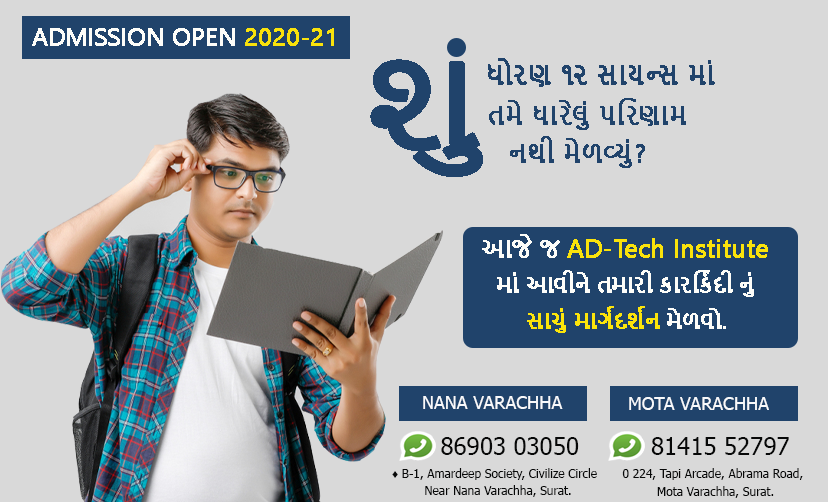
<style>
.page{position:relative;width:828px;height:502px;background:#d9d9d9}
.page>*{position:absolute;margin:0}
.t1{font:24px "NirmalaUI";color:#fdfdf9;font-weight:bold}
.t2{font:24px "NirmalaUI";color:#f9e20c;font-weight:bold}
.t3{font:122.1px "NirmalaUI";color:#20436b;font-weight:bold;scale:1.18 1}
.t4{font:26px "NirmalaUI";color:#20436b;font-weight:bold}
.t5{font:25px "NirmalaUI";color:#20436b;font-weight:bold}
.t6{font:25px "NirmalaUI";color:#fae30b;font-weight:bold}
.t7{font:21px "NirmalaUI";color:#fdfdf9;font-weight:bold}
.t8{font:21px "NirmalaUI";color:#fce40b;font-weight:bold}
.t9{font:18px "Tahoma";color:#f8f9fb}
.t10{font:24px "Tahoma";color:#070808}
.t11{font:12px "Tahoma";color:#070808}
</style>
<div class="page">
<p class="t1" style="left:32px;top:28px;width:302px;height:18px">ADMISSION OPEN <span class="t2">2020-21</span></p>
<p class="t3" style="left:370px;top:59px;width:113px;height:118px">શુ</p>
<p class="t4" style="left:488px;top:58px;width:227px;height:29px">ધોરણ ૧૨ સાયન્સ માં</p>
<p class="t5" style="left:489px;top:98px;width:197px;height:32px">તમે ધારેલું પરિણામ</p>
<p class="t5" style="left:510px;top:136px;width:135px;height:32px">નથી મેળવ્યું?</p>
<p class="t6" style="left:482px;top:234px;width:286px;height:24px"><span class="t1">આજે જ </span>AD-Tech Institute</p>
<p class="t7" style="left:497px;top:270px;width:257px;height:27px">માં આવીને તમારી કારર્કિદી નું</p>
<p class="t8" style="left:527px;top:306px;width:199px;height:27px">સાચું માર્ગદર્શન <span class="t7">મેળવો.</span></p>
<p class="t9" style="left:423px;top:396px;width:140px;height:13px">NANA VARACHHA</p>
<p class="t9" style="left:629px;top:397px;width:140px;height:13px">MOTA VARACHHA</p>
<p class="t10" style="left:441px;top:437px;width:138px;height:18px">86903 03050</p>
<p class="t10" style="left:651px;top:437px;width:138px;height:18px">81415 52797</p>
<p class="t11" style="left:392px;top:468px;width:205px;height:12px">♦ B-1, Amardeep Society, Civilize Circle</p>
<p class="t11" style="left:622px;top:468px;width:181px;height:12px">0 224, Tapi Arcade, Abrama Road,</p>
<p class="t11" style="left:425px;top:485px;width:146px;height:12px">Near Nana Varachha, Surat.</p>
<p class="t11" style="left:657px;top:486px;width:117px;height:12px">Mota Varachha, Surat.</p>
</div>
